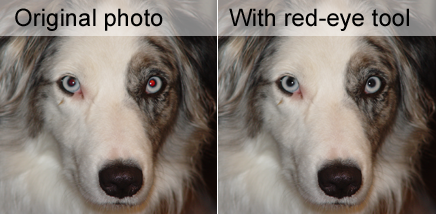
<style>
.page{position:relative;width:436px;height:214px}
.page>*{position:absolute;margin:0}
.t1{font:24px "ArialMT";color:#000000}
</style>
<div class="page">
<p class="t1" style="left:15px;top:8px;width:148px;height:23px">Original photo</p>
<p class="t1" style="left:229px;top:8px;width:180px;height:23px">With red-eye tool</p>
</div>
